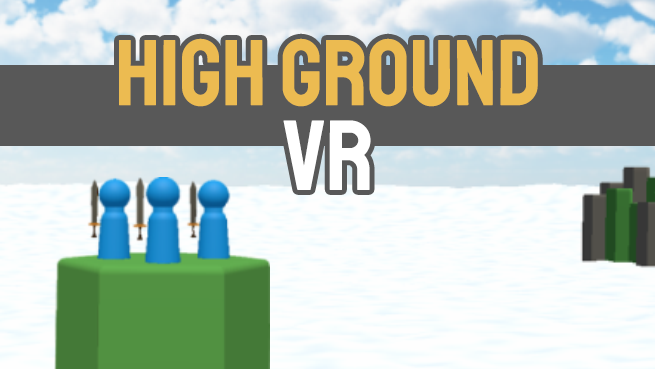
<style>
.page{position:relative;width:655px;height:369px}
.page>*{position:absolute;margin:0}
.t1{font:93.7px "Staatliches-Regular";color:#ecbb51}
.t2{font:99.5px "Staatliches-Regular";color:#ffffff}
</style>
<div class="page">
<p class="t1" style="left:119px;top:38px;width:419px;height:69px">HIGH GROUND</p>
<p class="t2" style="left:283px;top:120px;width:88px;height:70px">VR</p>
</div>
